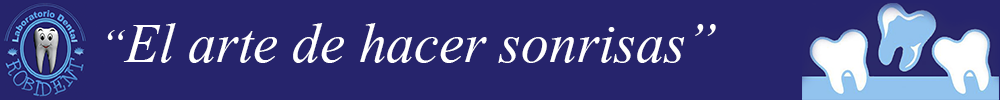
<style>
.page{position:relative;width:1000px;height:100px;background:#26246c}
.page>*{position:absolute;margin:0}
.t1{font:72px "Kokila-Italic";color:#ffffff}
.t2{font:60px "Kokila-Italic";color:#ffffff}
</style>
<div class="page">
<p class="t1" style="left:107px;top:23px;width:609px;height:40px"><span class="t2">“</span>El arte de hacer sonrisas”</p>
</div>
